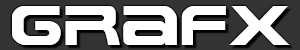
<style>
.page{position:relative;width:300px;height:50px;background:#ffffff}
.page>*{position:absolute;margin:0}
.t1{font:56px "EarthNormal";color:#ffffff}
</style>
<div class="page">
<p class="t1" style="left:12px;top:6px;width:278px;height:39px">grafx</p>
</div>
